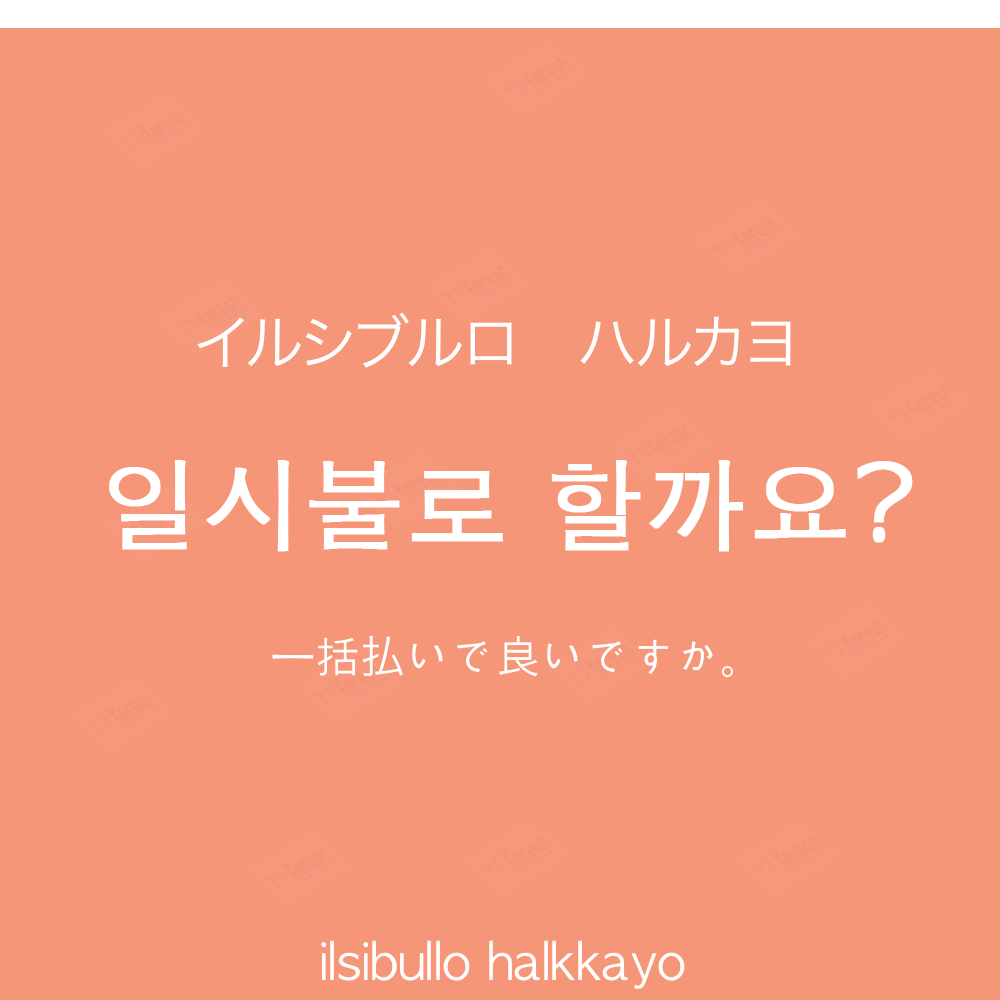
<style>
.page{position:relative;width:1000px;height:1000px;background:#f69679}
.page>*{position:absolute;margin:0}
.t1{font:60px "HiraKakuProN-W3";color:#ffffff}
.t2{font:100px "AppleGothic";color:#ffffff;font-weight:bold}
.t3{font:45px "AppleGothic";color:#ffffff}
.t4{font:45px "HiraKakuProN-W3";color:#ffffff}
.t5{font:50px "AppleGothic";color:#ffffff}
</style>
<div class="page">
<p class="t1" style="left:197px;top:312px;width:594px;height:56px">イルシブルロ　ハルカヨ</p>
<p class="t2" style="left:109px;top:460px;width:804px;height:92px">일시불로 할까요?</p>
<p class="t3" style="left:272px;top:635px;width:461px;height:43px">一括<span class="t4">払</span>いで良いですか。</p>
<p class="t5" style="left:321px;top:940px;width:364px;height:49px">ilsibullo halkkayo</p>
</div>
